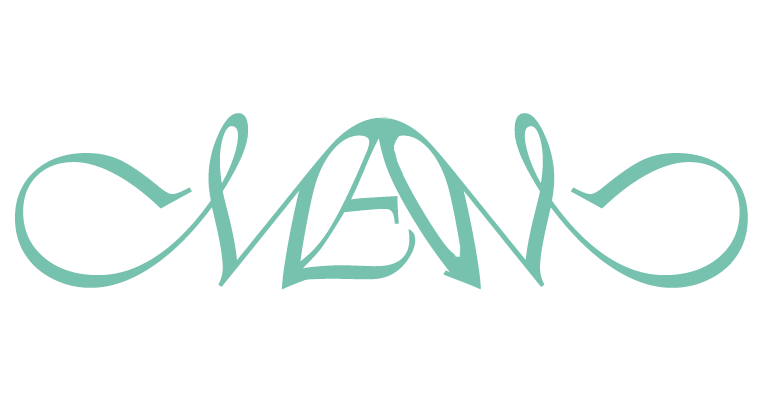
<style>
.page{position:relative;width:759px;height:399px;background:#ffffff}
.page>*{position:absolute;margin:0}
.t1{font:251.3px "Vivaldii";color:#76c2af}
.t2{font:231.1px "Vivaldii";color:#76c2af;scale:0.91 1}
</style>
<div class="page">
<p class="t1" style="left:15px;top:113px;width:368px;height:177px">M</p>
<p class="t2" style="left:283px;top:114px;width:182px;height:168px;rotate:-5deg">A</p>
</div>
